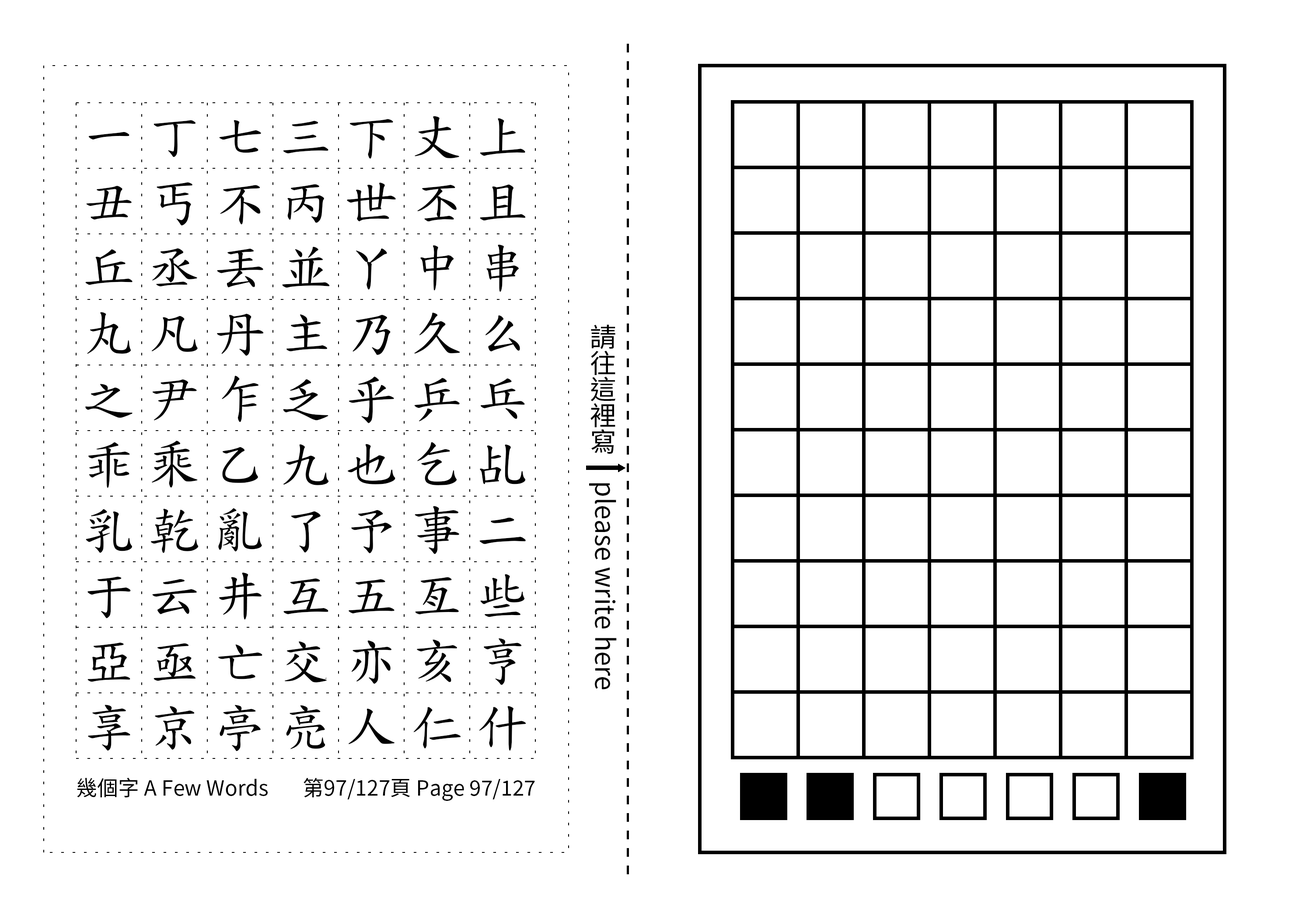
<style>
.page{position:relative;width:1299px;height:918px;background:#ffffff}
.page>*{position:absolute;margin:0}
.t1{font:52.5px/65.6px "TW-Kai-98_1";letter-spacing:0.25em;color:#000000}
.t2{font:26.2px "SourceHanSansTC-Regular";color:#000000}
.t3{font:21px "SourceHanSansTC-Regular";color:#000000}
</style>
<div class="page">
<p class="t1" style="left:85px;top:116px;width:441px;height:636px;text-align:center">一丁七三下丈上丑丐不丙世丕且丘丞丟並丫中串丸凡丹主乃久么之尹乍乏乎乒乓乖乘乙九也乞乩乳乾亂了予事二于云井互五亙些亞亟亡交亦亥亨享京亭亮人仁什</p>
<p class="t2" style="left:589px;top:324px;width:28px;height:366px;text-align:center">請往這裡寫　please write here</p>
<p class="t3" style="left:77px;top:778px;width:191px;height:20px">幾個字 A Few Words</p>
<p class="t3" style="left:303px;top:778px;width:232px;height:23px">第97/127頁 Page 97/127</p>
</div>
